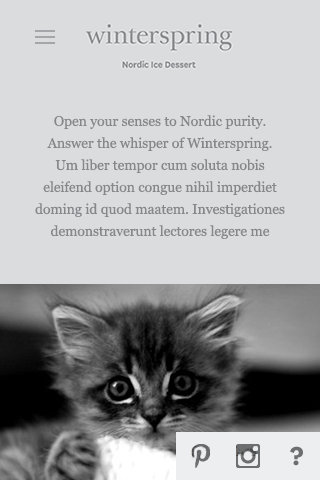
<style>
.page{position:relative;width:320px;height:480px;background:#dbdcde}
.page>*{position:absolute;margin:0}
.t1{font:14px/22px "Georgia";color:#86878b}
</style>
<div class="page">
<p class="t1" style="left:35px;top:115px;width:250px;height:124px;text-align:center">Open your senses to Nordic purity. Answer the whisper of Winterspring. Um liber tempor cum soluta nobis eleifend option congue nihil imperdiet doming id quod maatem. Investigationes demonstraverunt lectores legere me</p>
</div>
